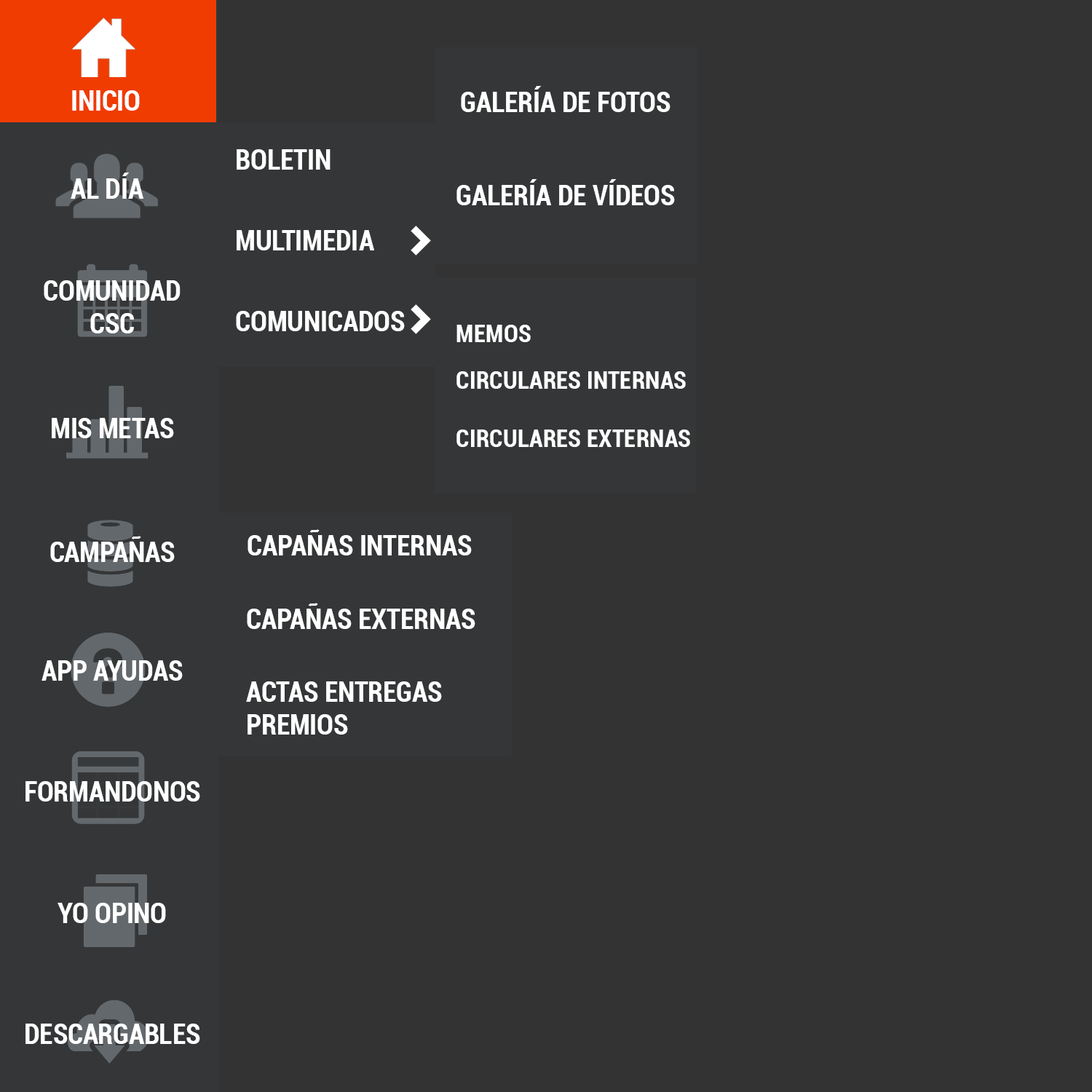
<style>
.page{position:relative;width:1092px;height:1092px;background:#333333}
.page>*{position:absolute;margin:0}
.t1{font:27.3px "Roboto-BoldCondensed";color:#ffffff}
.t2{font:24.3px "Roboto-BoldCondensed";color:#ffffff}
</style>
<div class="page">
<p class="t1" style="left:461px;top:86px;width:209px;height:26px">GALERÍA DE FOTOS</p>
<p class="t1" style="left:72px;top:90px;width:68px;height:21px">INICIO</p>
<p class="t1" style="left:237px;top:149px;width:94px;height:21px">BOLETIN</p>
<p class="t1" style="left:71px;top:173px;width:72px;height:26px">AL DÍA</p>
<p class="t1" style="left:456px;top:179px;width:219px;height:26px">GALERÍA DE VÍDEOS</p>
<p class="t1" style="left:237px;top:230px;width:137px;height:20px">MULTIMEDIA</p>
<p class="t1" style="left:44px;top:280px;width:137px;height:53px;text-align:center">COMUNIDAD<br>CSC</p>
<p class="t1" style="left:236px;top:311px;width:169px;height:20px">COMUNICADOS</p>
<p class="t2" style="left:456px;top:325px;width:75px;height:17px">MEMOS</p>
<p class="t2" style="left:456px;top:371px;width:230px;height:18px">CIRCULARES INTERNAS</p>
<p class="t1" style="left:52px;top:418px;width:122px;height:20px">MIS METAS</p>
<p class="t2" style="left:456px;top:430px;width:234px;height:17px">CIRCULARES EXTERNAS</p>
<p class="t1" style="left:248px;top:529px;width:224px;height:26px">CAPAÑAS INTERNAS</p>
<p class="t1" style="left:50px;top:536px;width:125px;height:26px">CAMPAÑAS</p>
<p class="t1" style="left:247px;top:603px;width:228px;height:26px">CAPAÑAS EXTERNAS</p>
<p class="t1" style="left:41px;top:660px;width:142px;height:21px">APP AYUDAS</p>
<p class="t1" style="left:246px;top:681px;width:196px;height:54px">ACTAS ENTREGAS <br>PREMIOS</p>
<p class="t1" style="left:25px;top:781px;width:175px;height:21px">FORMANDONOS</p>
<p class="t1" style="left:58px;top:903px;width:108px;height:20px">YO OPINO</p>
<p class="t1" style="left:25px;top:1024px;width:175px;height:20px">DESCARGABLES</p>
</div>
